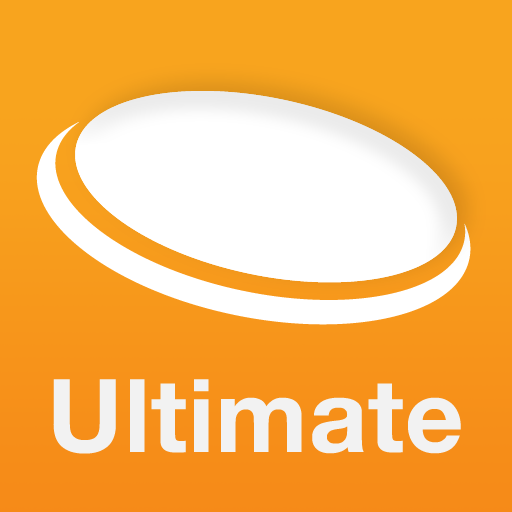
<style>
.page{position:relative;width:512px;height:512px}
.page>*{position:absolute;margin:0}
.t1{font:102px "HelveticaNeue-Bold";letter-spacing:0.01em;color:#f2f2f2}
</style>
<div class="page">
<p class="t1" style="left:53px;top:379px;width:408px;height:75px">Ultimate</p>
</div>
